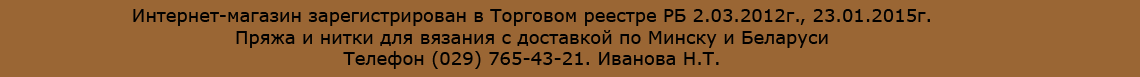
<style>
.page{position:relative;width:1140px;height:77px;background:#9a6634}
.page>*{position:absolute;margin:0}
.t1{font:18px "Verdana";color:#000000}
</style>
<div class="page">
<p class="t1" style="left:133px;top:9px;width:797px;height:60px;text-align:center">Интернет-магазин зарегистрирован в Торговом реестре РБ 2.03.2012г., 23.01.2015г.<br>Пряжа и нитки для вязания с доставкой по Минску и Беларуси<br>Телефон (029) 765-43-21. Иванова Н.Т.</p>
</div>
